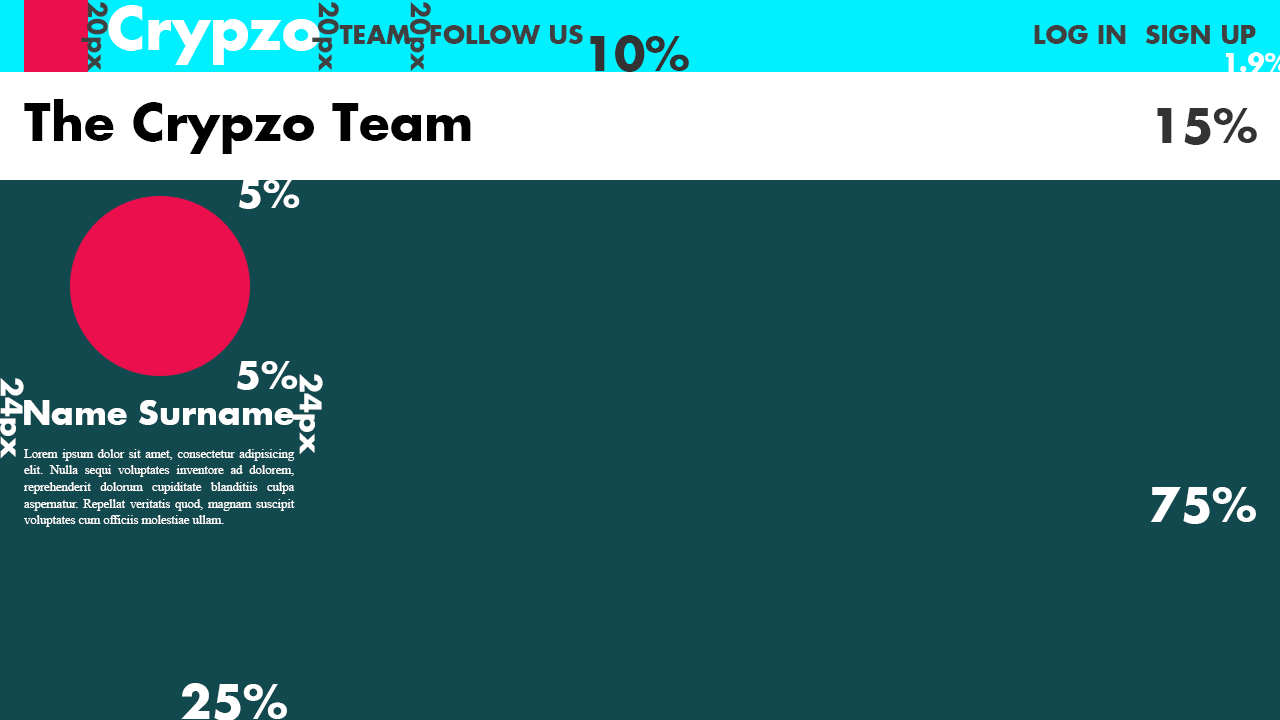
<style>
.page{position:relative;width:1280px;height:720px;background:#11494e}
.page>*{position:absolute;margin:0}
.t1{font:25.4px "FuturaKoyu";color:#404040}
.t2{font:58.3px "FuturaKoyu";color:#ffffff}
.t3{font:25px "FuturaKoyu";color:#404040}
.t4{font:45.8px "FuturaKoyu";color:#333333}
.t5{font:50px "FuturaKoyu";color:#010000}
.t6{font:37.5px "FuturaKoyu";color:#ffffff}
.t7{font:28.9px "FuturaKoyu";color:#ffffff}
.t8{font:33.3px "FuturaKoyu";color:#ffffff}
.t9{font:12.5px/16.7px "TimesNewRomanPSMT";color:#ffffff}
.t10{font:45.8px "FuturaKoyu";color:#ffffff}
</style>
<div class="page">
<p class="t1" style="left:81px;top:2px;width:27px;height:70px;rotate:90deg">20px</p>
<p class="t2" style="left:108px;top:5px;width:212px;height:60px">Crypzo</p>
<p class="t1" style="left:312px;top:2px;width:27px;height:70px;rotate:90deg">20px</p>
<p class="t1" style="left:404px;top:2px;width:27px;height:70px;rotate:90deg">20px</p>
<p class="t3" style="left:339px;top:25px;width:72px;height:19px">TEAM</p>
<p class="t1" style="left:430px;top:25px;width:153px;height:19px">FOLLOW US</p>
<p class="t1" style="left:1034px;top:25px;width:92px;height:19px">LOG IN</p>
<p class="t1" style="left:1145px;top:25px;width:111px;height:19px">SIGN UP</p>
<p class="t4" style="left:590px;top:35px;width:99px;height:37px">10%</p>
<p class="t5" style="left:24px;top:99px;width:447px;height:55px">The Crypzo Team</p>
<p class="t4" style="left:1157px;top:108px;width:100px;height:37px">15%</p>
<p class="t6" style="left:239px;top:180px;width:61px;height:29px">5%</p>
<p class="t6" style="left:237px;top:361px;width:61px;height:29px">5%</p>
<p class="t7" style="left:292px;top:374px;width:31px;height:81px;rotate:90deg">24px</p>
<p class="t8" style="left:24px;top:400px;width:270px;height:25px">Name Surname</p>
<p class="t9" style="left:24px;top:449px;width:271px;height:78px;text-align:justify">Lorem ipsum dolor sit amet, consectetur adipisicing elit. Nulla sequi voluptates inventore ad dolorem, reprehenderit dolorum cupiditate blanditiis culpa aspernatur. Repellat veritatis quod, magnam suscipit voluptates cum officiis molestiae ullam.</p>
<p class="t10" style="left:1150px;top:487px;width:106px;height:37px">75%</p>
<p class="t10" style="left:181px;top:683px;width:106px;height:38px">25%</p>
</div>
